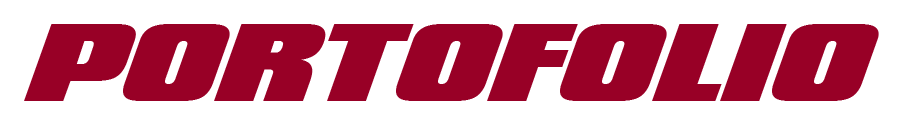
<style>
.page{position:relative;width:902px;height:126px;background:#ffffff}
.page>*{position:absolute;margin:0}
.t1{font:95.7px "LHFConvectaBASE";color:#980026}
</style>
<div class="page">
<p class="t1" style="left:24px;top:24px;width:855px;height:77px">PORTOFOLIO</p>
</div>
